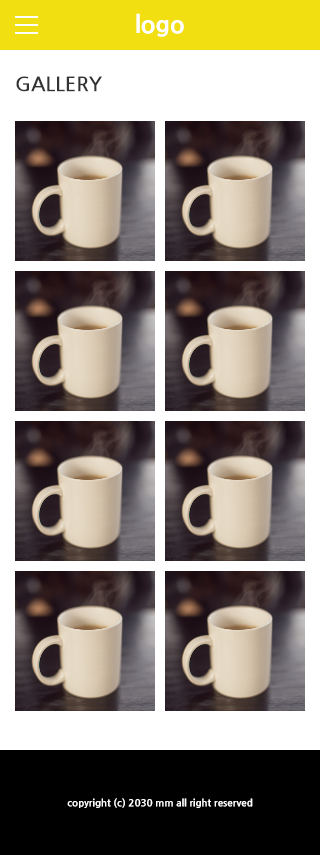
<style>
.page{position:relative;width:320px;height:855px;background:#ffffff}
.page>*{position:absolute;margin:0}
.t1{font:24px "NanumGothicExtraBold";color:#ffffff}
.t2{font:20px "NanumGothicBold";color:#333333;text-transform:uppercase}
.t3{font:10px "NanumGothicExtraBold";color:#ffffff}
</style>
<div class="page">
<p class="t1" style="left:136px;top:13px;width:48px;height:24px">logo</p>
<p class="t2" style="left:16px;top:76px;width:86px;height:16px">Gallery</p>
<p class="t3" style="left:67px;top:798px;width:186px;height:10px">copyright (c) 2030 mm all right reserved</p>
</div>
